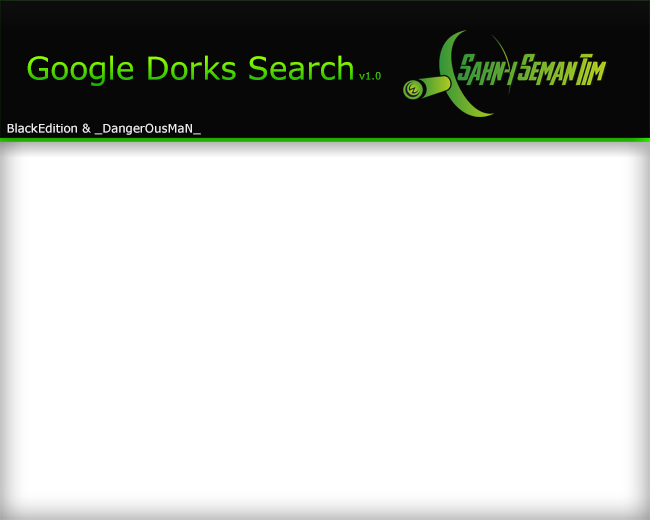
<style>
.page{position:relative;width:650px;height:520px;background:#ffffff}
.page>*{position:absolute;margin:0}
.t1{font:31.2px "Verdana"}
.t2{font:10px "Verdana"}
.t3{font:11.7px "Verdana";color:#fdfcfc}
</style>
<div class="page">
<p class="t1" style="left:27px;top:55px;width:354px;height:31px">Google Dorks Search<span class="t2"> v1.0</span></p>
<p class="t3" style="left:7px;top:123px;width:194px;height:12px">BlackEdition &amp; _DangerOusMaN_</p>
</div>
